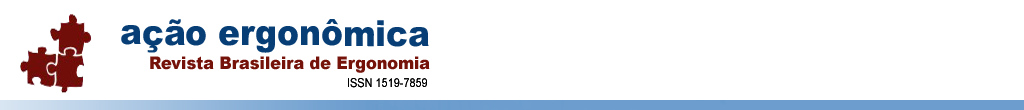
<style>
.page{position:relative;width:1024px;height:110px;background:#ffffff}
.page>*{position:absolute;margin:0}
.t1{font:36px "Arial-Black";color:#073e75;scale:0.91 1}
.t2{font:17.6px "Arial-Black";color:#75130a;scale:0.91 1}
.t3{font:12px "ArialMT";color:#000000;scale:0.91 1}
</style>
<div class="page">
<p class="t1" style="left:121px;top:19px;width:308px;height:34px">ação ergonômica</p>
<p class="t2" style="left:150px;top:56px;width:280px;height:17px">Revista Brasileira de Ergonomia</p>
<p class="t3" style="left:348px;top:78px;width:79px;height:10px">ISSN 1519-7859</p>
</div>
